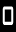
<style>
.page{position:relative;width:16px;height:32px;background:#000000}
.page>*{position:absolute;margin:0}
.t1{font:36px "BankGothicBT-Medium";color:#ffffff;scale:0.5 1}
</style>
<div class="page">
<p class="t1" style="left:2px;top:6px;width:12px;height:19px">0</p>
</div>
